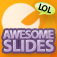
<style>
.page{position:relative;width:57px;height:57px}
.page>*{position:absolute;margin:0}
.t1{font:8.4px "MyriadPro-Regular";color:#000000}
.t2{font:11.7px/12.8px "MyriadPro-Bold";letter-spacing:-0.08em;color:#bda6c9;text-transform:uppercase;font-weight:bold}
.t3{font:17.1px/12.8px "MyriadPro-Bold";letter-spacing:-0.05em;color:#bda6c9;text-transform:uppercase;font-weight:bold}
</style>
<div class="page">
<p class="t1" style="left:38px;top:3px;width:13px;height:11px;rotate:19deg">LOL</p>
<p class="t2" style="left:3px;top:30px;width:51px;height:22px">Awesome<br><span class="t3">Slides</span></p>
</div>
